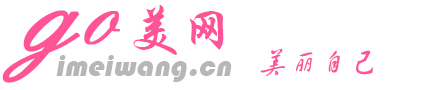
<style>
.page{position:relative;width:424px;height:90px;background:#ffffff}
.page>*{position:absolute;margin:0}
.t1{font:30px "FZHCJW--GB1-0";color:#ff5498;font-style:italic}
.t2{font:30px "Bauhaus93";color:#b7b7b7;font-style:italic}
</style>
<div class="page">
<p class="t1" style="left:260px;top:48px;width:113px;height:28px">美丽自己</p>
<p class="t2" style="left:56px;top:55px;width:176px;height:27px">imeiwang.cn</p>
</div>
